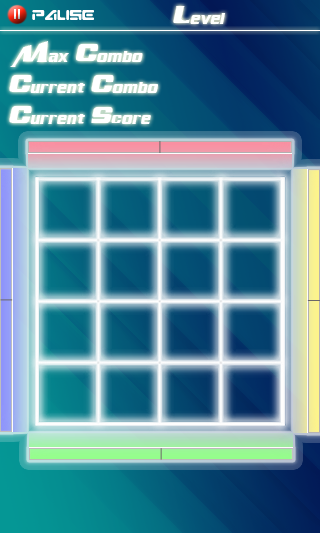
<style>
.page{position:relative;width:320px;height:533px}
.page>*{position:absolute;margin:0}
.t1{font:25px "AirMillhouseItalic";color:#fcfefc}
.t2{font:12.5px "Abduction";color:#fffefe}
.t3{font:25px "AirMillhouseItalic";color:#ffffff}
</style>
<div class="page">
<p class="t1" style="left:173px;top:6px;width:53px;height:18px">Level</p>
<p class="t2" style="left:32px;top:10px;width:62px;height:10px">Pause</p>
<p class="t3" style="left:10px;top:41px;width:133px;height:26px">Max Combo</p>
<p class="t3" style="left:9px;top:75px;width:149px;height:18px">Current Combo</p>
<p class="t3" style="left:9px;top:106px;width:142px;height:18px">Current Score</p>
</div>
